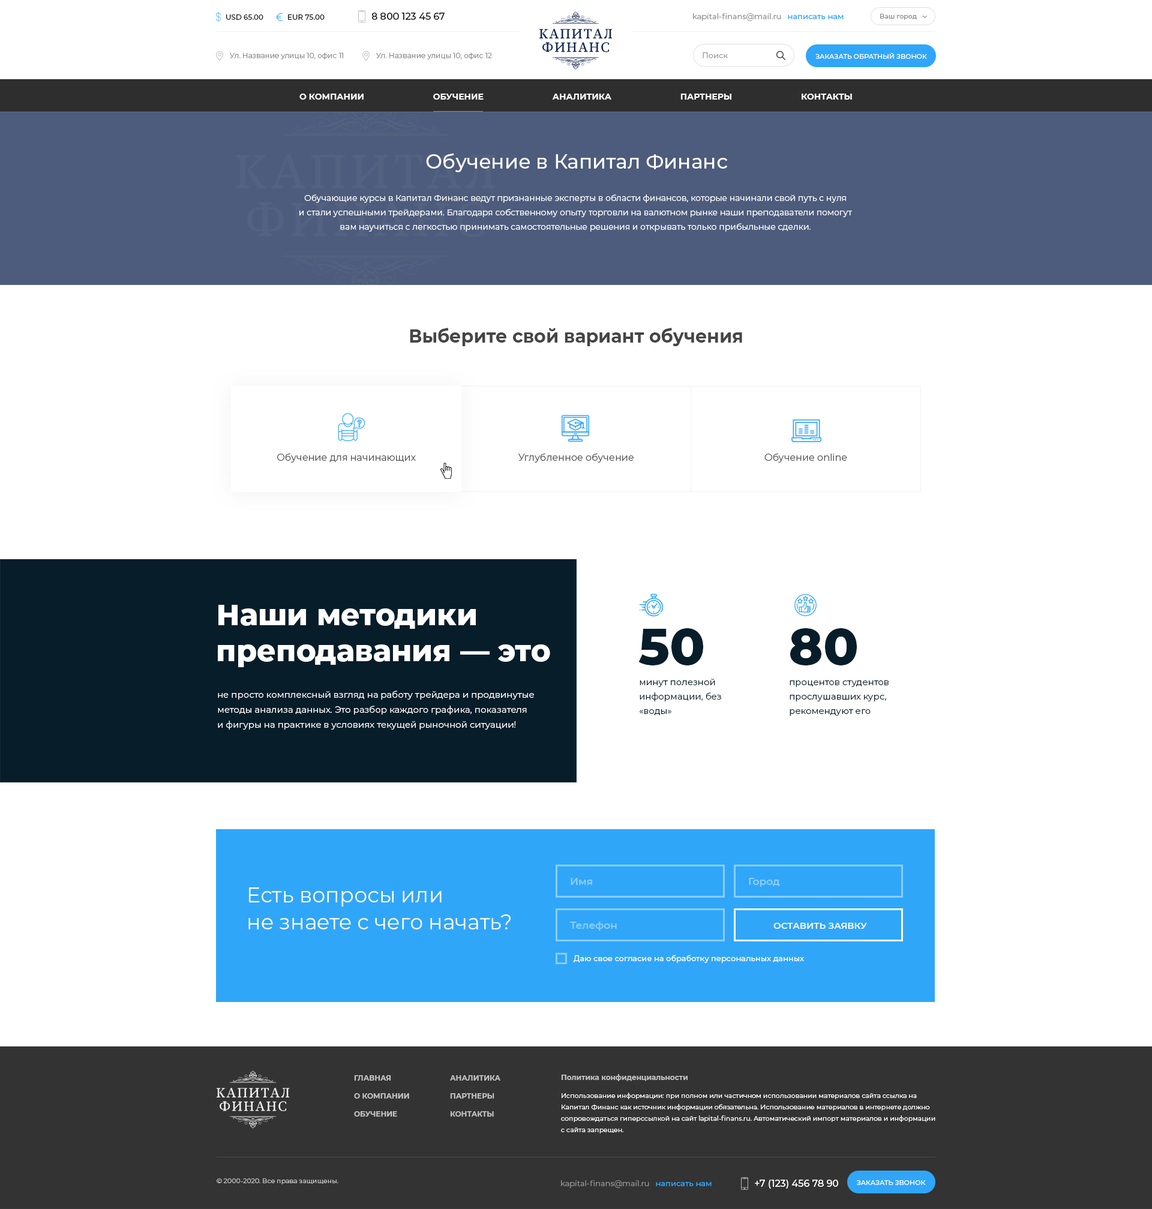
<style>
.page{position:relative;width:1152px;height:1209px;background:#ffffff}
.page>*{position:absolute;margin:0}
.t1{font:7.2px "Montserrat-Medium";color:#191919}
.t2{font:9.6px "Montserrat-Medium";color:#191919}
.t3{font:7.8px "Montserrat-Regular";color:#909090}
.t4{font:7.8px "Montserrat-Medium";color:#30a6f9}
.t5{font:6.6px "Montserrat-Medium";color:#909090}
.t6{font:7.2px "Montserrat-Regular";color:#8a8a8a}
.t7{font:7.8px "Montserrat-Medium";color:#a1a1a1}
.t8{font:6.6px "Montserrat-Medium";color:#ffffff}
.t9{font:8.4px "Montserrat-Bold";color:#ffffff}
.t10{font:19.8px "Montserrat-Medium";color:#ffffff}
.t11{font:8.4px/14.4px "Montserrat-Regular";color:#ffffff}
.t12{font:18px "Montserrat-Bold";color:#454545}
.t13{font:9.6px "Montserrat-Regular";color:#4f4f4f}
.t14{font:29.4px/36px "Montserrat-ExtraBold";color:#ffffff}
.t15{font:51.6px "Montserrat-ExtraBold";color:#071d2a}
.t16{font:9px/14.4px "Montserrat-Regular";color:#071d2a}
.t17{font:9px/15px "Montserrat-Regular";color:#ffffff}
.t18{font:10.2px "Montserrat-SemiBold";color:#89ceff}
.t19{font:21px/27px "Montserrat-Regular";color:#ffffff}
.t20{font:9px "Montserrat-SemiBold";color:#ffffff}
.t21{font:7.8px "Montserrat-Medium";color:#ffffff}
.t22{font:7.2px/18px "Montserrat-Bold";color:#c3c3c3}
.t23{font:6.6px/11.4px "Montserrat-Regular";color:#ffffff}
.t24{font:6.6px/18px "Montserrat-Regular";color:#ffffff}
.t25{font:6.6px "Montserrat-Regular";color:#c3c3c3}
.t26{font:9.6px "Montserrat-Medium";color:#ffffff}
</style>
<div class="page">
<p class="t1" style="left:226px;top:14px;width:37px;height:6px">USD 65.00</p>
<p class="t1" style="left:288px;top:14px;width:37px;height:6px">EUR 75.00</p>
<p class="t2" style="left:372px;top:13px;width:73px;height:7px">8 800 123 45 67</p>
<p class="t3" style="left:693px;top:13px;width:151px;height:8px">kapital-finans@mail.ru   <span class="t4">написать нам</span></p>
<p class="t5" style="left:880px;top:14px;width:37px;height:6px">Ваш город</p>
<p class="t6" style="left:230px;top:53px;width:113px;height:6px">Ул. Название улицы 10, офис 11</p>
<p class="t6" style="left:376px;top:53px;width:116px;height:6px">Ул. Название улицы 10, офис 12</p>
<p class="t7" style="left:703px;top:52px;width:25px;height:6px">Поиск</p>
<p class="t8" style="left:815px;top:53px;width:112px;height:6px">ЗАКАЗАТЬ ОБРАТНЫЙ ЗВОНОК</p>
<p class="t9" style="left:299px;top:94px;width:553px;height:6px">О КОМПАНИИ                             ОБУЧЕНИЕ                             АНАЛИТИКА                             ПАРТНЕРЫ                             КОНТАКТЫ</p>
<p class="t10" style="left:426px;top:153px;width:302px;height:19px">Обучение в Капитал Финанс</p>
<p class="t11" style="left:299px;top:194px;width:553px;height:38px;text-align:center">Обучающие курсы в Капитал Финанс ведут признанные эксперты в области финансов, которые начинали свой путь с нуля<br>и стали успешными трейдерами. Благодаря собственному опыту торговли на валютном рынке наши преподаватели помогут<br>вам научиться с легкостью принимать самостоятельные решения и открывать только прибыльные сделки.</p>
<p class="t12" style="left:410px;top:328px;width:332px;height:18px">Выберите свой вариант обучения</p>
<p class="t13" style="left:277px;top:453px;width:139px;height:10px">Обучение для начинающих</p>
<p class="t13" style="left:518px;top:453px;width:116px;height:10px">Углубленное обучение</p>
<p class="t13" style="left:764px;top:453px;width:83px;height:10px">Обучение online</p>
<p class="t14" style="left:218px;top:605px;width:332px;height:62px">Наши методики<br>преподавания — это</p>
<p class="t15" style="left:638px;top:628px;width:65px;height:37px">50</p>
<p class="t15" style="left:790px;top:628px;width:67px;height:37px">80</p>
<p class="t16" style="left:640px;top:678px;width:81px;height:37px">минут полезной<br>информации, без<br>«воды»</p>
<p class="t16" style="left:790px;top:680px;width:99px;height:36px">процентов студентов<br>прослушавших курс,<br>рекомендуют его</p>
<p class="t17" style="left:218px;top:691px;width:316px;height:39px">не просто комплексный взгляд на работу трейдера и продвинутые<br>методы анализа данных. Это разбор каждого графика, показателя<br>и фигуры на практике в условиях текущей рыночной ситуации!</p>
<p class="t18" style="left:571px;top:878px;width:21px;height:7px">Имя</p>
<p class="t18" style="left:749px;top:878px;width:31px;height:9px">Город</p>
<p class="t19" style="left:248px;top:887px;width:263px;height:42px">Есть вопросы или<br>не знаете с чего начать?</p>
<p class="t18" style="left:570px;top:922px;width:47px;height:9px">Телефон</p>
<p class="t20" style="left:773px;top:923px;width:94px;height:6px">ОСТАВИТЬ ЗАЯВКУ</p>
<p class="t21" style="left:574px;top:955px;width:230px;height:8px">Даю свое согласие на обработку персональных данных</p>
<p class="t22" style="left:354px;top:1075px;width:55px;height:42px">ГЛАВНАЯ<br>О КОМПАНИИ<br>ОБУЧЕНИЕ</p>
<p class="t22" style="left:450px;top:1075px;width:50px;height:42px">АНАЛИТИКА<br>ПАРТНЕРЫ<br>КОНТАКТЫ</p>
<p class="t23" style="left:561px;top:1074px;width:374px;height:59px"><span class="t22">Политика конфиденциальности <br></span><span class="t24">Использование информации: при полном или частичном использовании материалов сайта ссылка на<br></span>Капитал Финанс как источник информации обязательна. Использование материалов в интернете должно<br>сопровождаться гиперссылкой на сайт lapital-finans.ru. Автоматический импорт материалов и информации<br>с сайта запрещен.</p>
<p class="t25" style="left:217px;top:1178px;width:121px;height:6px">© 2000-2020. Все права защищены.</p>
<p class="t3" style="left:561px;top:1180px;width:151px;height:8px">kapital-finans@mail.ru   <span class="t4">написать нам</span></p>
<p class="t26" style="left:755px;top:1180px;width:83px;height:9px">+7 (123) 456 78 90</p>
<p class="t8" style="left:857px;top:1180px;width:69px;height:5px">ЗАКАЗАТЬ ЗВОНОК</p>
</div>
